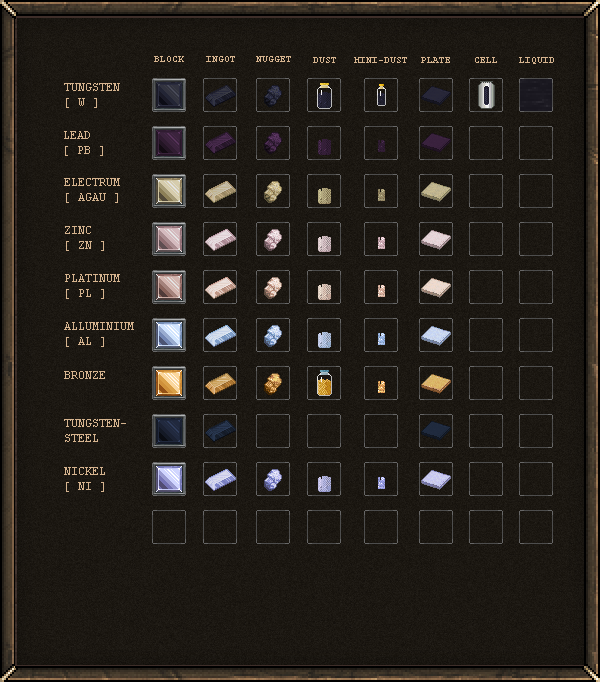
<style>
.page{position:relative;width:600px;height:682px}
.page>*{position:absolute;margin:0}
.t1{font:10px "CourierNewPS-BoldMT";color:#d6b48f;text-transform:uppercase}
.t2{font:10.1px "CourierNewPS-BoldMT";color:#d6b48f;text-transform:uppercase}
.t3{font:12px "CourierNewPSMT";color:#d6b48f;text-transform:uppercase}
</style>
<div class="page">
<p class="t1" style="left:154px;top:56px;width:30px;height:6px">Block</p>
<p class="t1" style="left:206px;top:56px;width:29px;height:6px">Ingot</p>
<p class="t1" style="left:256px;top:56px;width:35px;height:6px">Nugget</p>
<p class="t2" style="left:313px;top:57px;width:23px;height:6px">dust</p>
<p class="t2" style="left:354px;top:57px;width:53px;height:6px">mini-dust</p>
<p class="t2" style="left:421px;top:57px;width:29px;height:6px">plate</p>
<p class="t2" style="left:475px;top:57px;width:22px;height:6px">cell</p>
<p class="t2" style="left:519px;top:57px;width:35px;height:7px">liquid</p>
<p class="t3" style="left:64px;top:83px;width:56px;height:25px">Tungsten <br>[ W ]</p>
<p class="t3" style="left:64px;top:131px;width:39px;height:25px">LEAD <br>[ Pb ]</p>
<p class="t3" style="left:64px;top:178px;width:56px;height:25px">Electrum <br>[ Agau ]</p>
<p class="t3" style="left:65px;top:226px;width:39px;height:25px">Zinc<br>[ Zn ]</p>
<p class="t3" style="left:65px;top:274px;width:55px;height:25px">Platinum<br>[ pl ]</p>
<p class="t3" style="left:64px;top:322px;width:70px;height:25px">Alluminium<br>[ Al ]</p>
<p class="t3" style="left:64px;top:371px;width:41px;height:8px">Bronze</p>
<p class="t3" style="left:64px;top:419px;width:62px;height:23px">Tungsten-<br>steel</p>
<p class="t3" style="left:64px;top:467px;width:41px;height:25px">Nickel<br>[ Ni ]</p>
</div>
